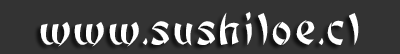
<style>
.page{position:relative;width:400px;height:54px;background:#333333}
.page>*{position:absolute;margin:0}
.t1{font:60px "BonzaiRegular";color:#ffffff}
</style>
<div class="page">
<p class="t1" style="left:40px;top:11px;width:319px;height:36px">www.sushiloe.cl</p>
</div>
